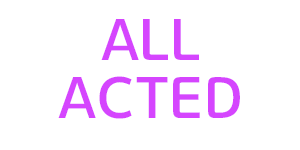
<style>
.page{position:relative;width:300px;height:150px;background:#ffffff}
.page>*{position:absolute;margin:0}
.t1{font:58.3px/58.3px "GyeonggiTitleMOTF";color:#d545fe}
</style>
<div class="page">
<p class="t1" style="left:58px;top:19px;width:182px;height:100px;text-align:center">ALL<br>ACTED</p>
</div>
